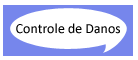
<style>
.page{position:relative;width:138px;height:60px;background:#ffffff}
.page>*{position:absolute;margin:0}
.t1{font:14px "Calibri";color:#000000}
</style>
<div class="page">
<p class="t1" style="left:16px;top:23px;width:104px;height:11px">Controle de Danos</p>
</div>
